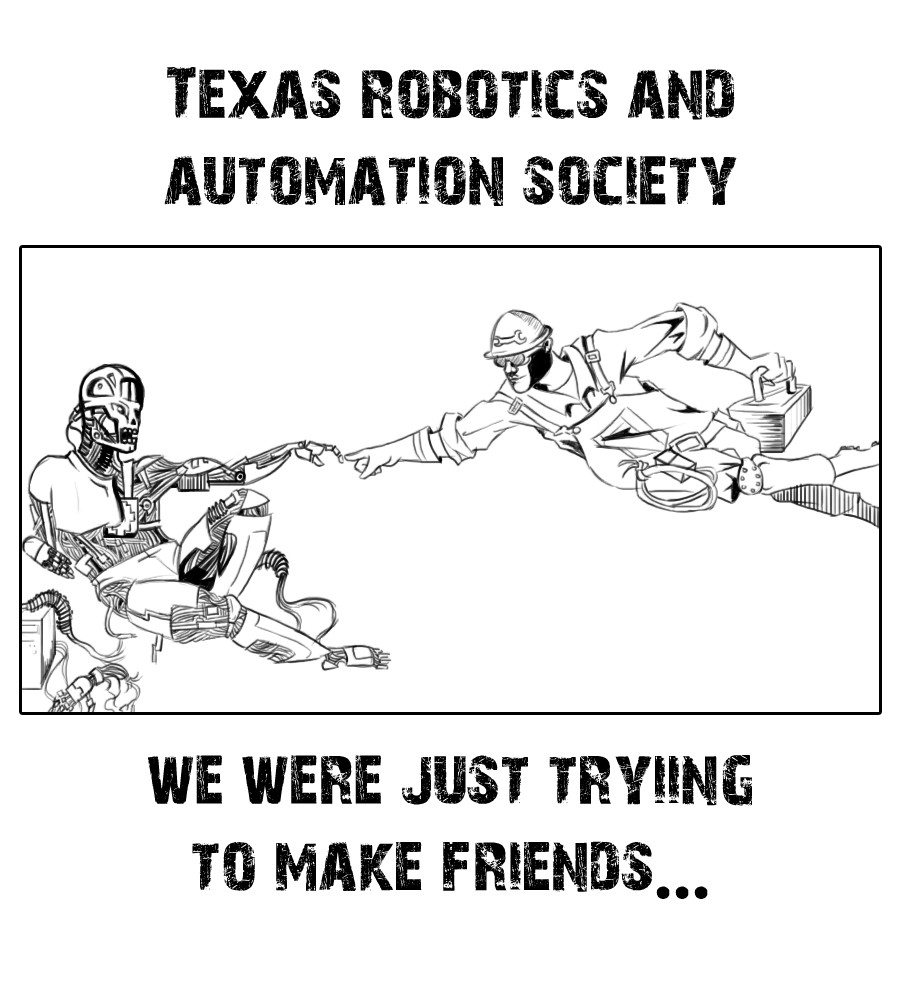
<style>
.page{position:relative;width:900px;height:1000px;background:#ffffff}
.page>*{position:absolute;margin:0}
.t1{font:72px "28DaysLater";color:#000000}
.t2{font:72px "DepressionistThree";color:#000000}
</style>
<div class="page">
<p class="t1" style="left:164px;top:67px;width:573px;height:139px;text-align:center">Texas robotics and <br>automation society</p>
<p class="t1" style="left:148px;top:755px;width:604px;height:144px;text-align:center">we were just tryiing<br>to make friends<span class="t2">...</span></p>
</div>
